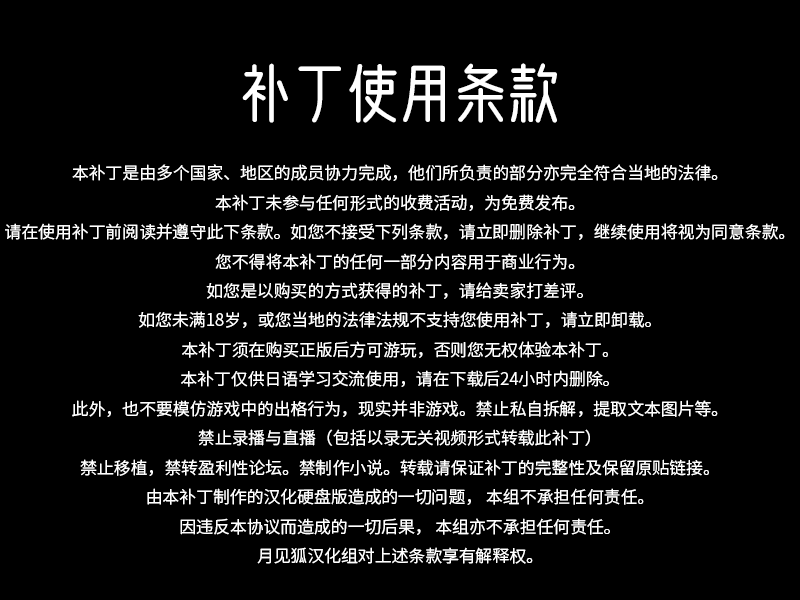
<style>
.page{position:relative;width:800px;height:600px;background:#000000}
.page>*{position:absolute;margin:0}
.t1{font:63.1px "WenCang-Regular";color:#ffffff}
.t2{font:16.8px "SourceHanSansSC-Normal";color:#ffffff}
</style>
<div class="page">
<p class="t1" style="left:242px;top:63px;width:315px;height:60px">补丁使用条款</p>
<p class="t2" style="left:5px;top:164px;width:780px;height:400px;text-align:center">本补丁是由多个国家、地区的成员协力完成，他们所负责的部分亦完全符合当地的法律。<br>本补丁未参与任何形式的收费活动，为免费发布。<br>请在使用补丁前阅读并遵守此下条款。如您不接受下列条款，请立即删除补丁，继续使用将视为同意条款。<br>您不得将本补丁的任何一部分内容用于商业行为。<br>如您是以购买的方式获得的补丁，请给卖家打差评。<br>如您未满18岁，或您当地的法律法规不支持您使用补丁，请立即卸载。<br>本补丁须在购买正版后方可游玩，否则您无权体验本补丁。<br>本补丁仅供日语学习交流使用，请在下载后24小时内删除。<br>此外，也不要模仿游戏中的出格行为，现实并非游戏。禁止私自拆解，提取文本图片等。<br>禁止录播与直播（包括以录无关视频形式转载此补丁）<br>禁止移植，禁转盈利性论坛。禁制作小说。转载请保证补丁的完整性及保留原贴链接。<br>由本补丁制作的汉化硬盘版造成的一切问题， 本组不承担任何责任。<br>因违反本协议而造成的一切后果， 本组亦不承担任何责任。<br>月见狐汉化组对上述条款享有解释权。</p>
</div>
